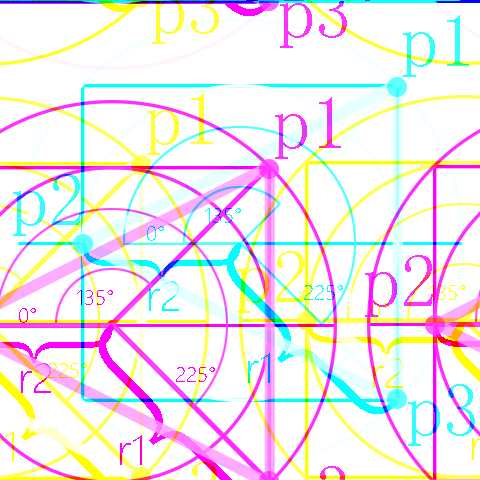
<style>
.page{position:relative;width:480px;height:480px;background:#ffffff}
.page>*{position:absolute;margin:0}
.t1{font:75px "LiSu"}
.t2{font:256.6px "LiSu"}
.t3{font:40px "MicrosoftJhengHeiLight"}
</style>
<div class="page">
<p class="t1" style="left:403px;top:12px;width:66px;height:62px">p1</p>
<p class="t1" style="left:13px;top:171px;width:68px;height:62px">p2</p>
<p class="t2" style="left:227px;top:239px;width:172px;height:172px;rotate:-45deg">{</p>
<p class="t3" style="left:248px;top:350px;width:22px;height:30px">r1</p>
<p class="t1" style="left:408px;top:381px;width:67px;height:62px">p3</p>
</div>
